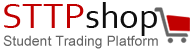
<style>
.page{position:relative;width:191px;height:49px;background:#ffffff}
.page>*{position:absolute;margin:0}
.t1{font:37px "Corbel";color:#c10000}
.t2{font:37px "Corbel";color:#0e0e0e}
.t3{font:14px "ArialMT";color:#646464}
</style>
<div class="page">
<p class="t1" style="left:4px;top:2px;width:153px;height:34px">STTP<span class="t2">shop</span></p>
<p class="t3" style="left:3px;top:35px;width:155px;height:14px">Student Trading Platform</p>
</div>
